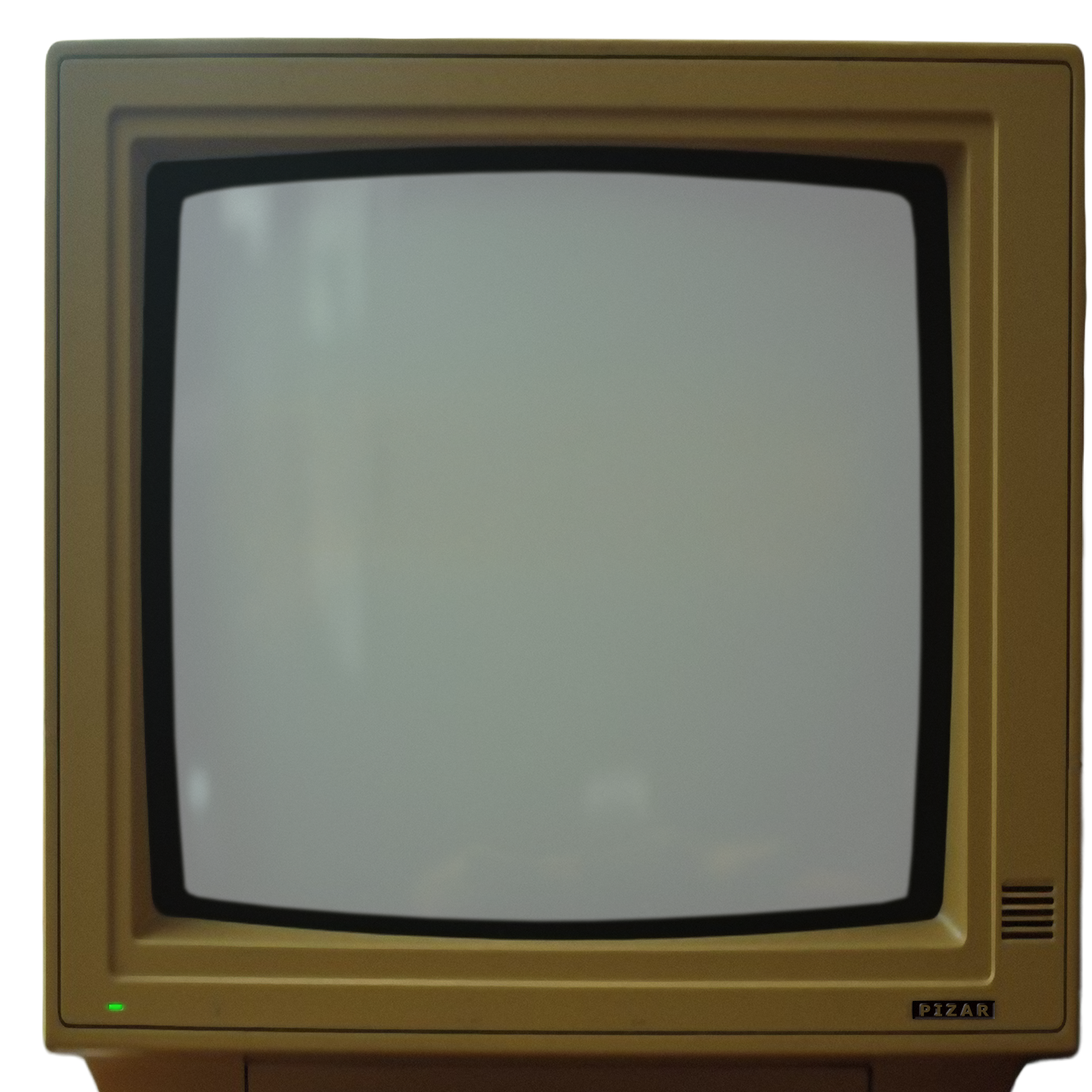
<style>
.page{position:relative;width:1092px;height:1092px}
.page>*{position:absolute;margin:0}
.t1{font:15.7px "Verdana-Bold";letter-spacing:0.2em;color:#483a1e;text-transform:uppercase}
</style>
<div class="page">
<p class="t1" style="left:920px;top:1005px;width:70px;height:12px">Pizar</p>
</div>
